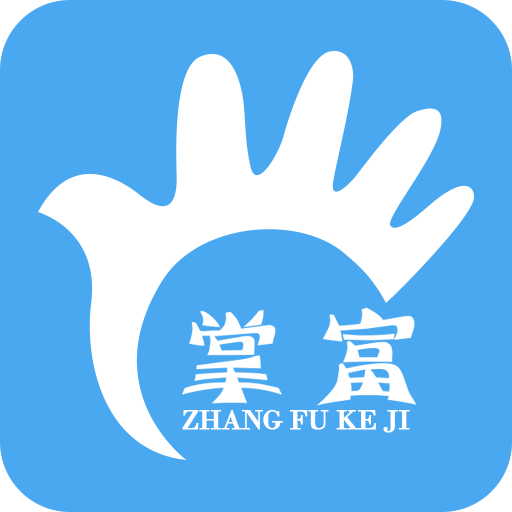
<style>
.page{position:relative;width:512px;height:512px;background:#49a8ef}
.page>*{position:absolute;margin:0}
.t1{font:29px "BodoniMT";letter-spacing:-0.05em;color:#ffffff;font-weight:bold}
</style>
<div class="page">
<p class="t1" style="left:182px;top:410px;width:228px;height:23px">ZHANG FU KE JI</p>
</div>
